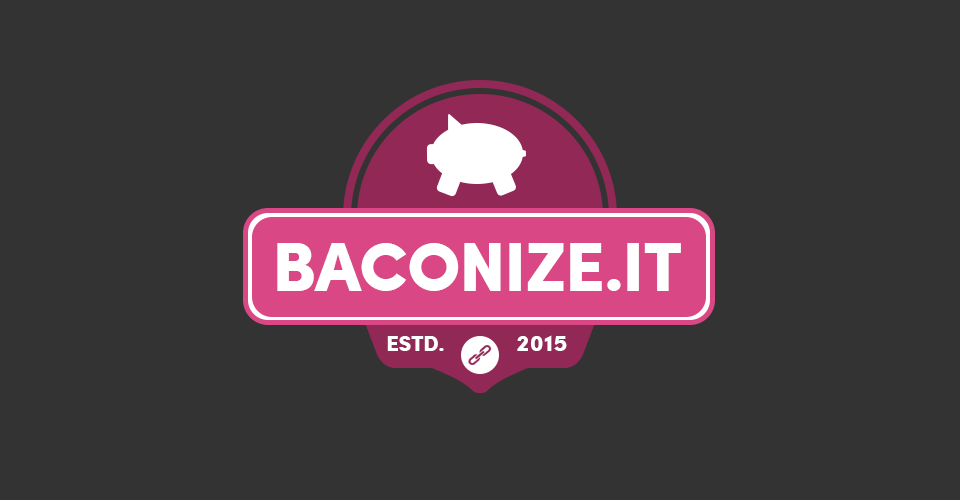
<style>
.page{position:relative;width:960px;height:500px;background:#333333}
.page>*{position:absolute;margin:0}
.t1{font:69px "SofiaProBlack";letter-spacing:-0.02em;color:#ffffff}
.t2{font:22px "SofiaProBlack";letter-spacing:-0.02em;color:#ffffff}
.t3{font:23px "SofiaProBlack";letter-spacing:0.02em;color:#ffffff}
</style>
<div class="page">
<p class="t1" style="left:277px;top:243px;width:404px;height:48px">BACONIZE.IT</p>
<p class="t2" style="left:387px;top:336px;width:57px;height:15px">ESTD.</p>
<p class="t3" style="left:517px;top:335px;width:50px;height:16px">2015</p>
</div>
